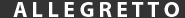
<style>
.page{position:relative;width:185px;height:18px;background:#333333}
.page>*{position:absolute;margin:0}
.t1{font:22px "MyriadPro-Bold";color:#ffffff}
</style>
<div class="page">
<p class="t1" style="left:13px;top:2px;width:166px;height:15px">A L L E G R E T T O</p>
</div>
